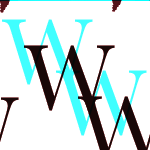
<style>
.page{position:relative;width:150px;height:150px;background:#ffffff}
.page>*{position:absolute;margin:0}
.t1{font:95.8px "Baskerville";color:#40ffff}
</style>
<div class="page">
<p class="t1" style="left:2px;top:18px;width:91px;height:66px">W</p>
<p class="t1" style="left:56px;top:69px;width:91px;height:66px">W</p>
</div>
